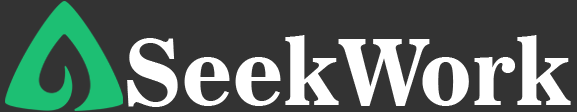
<style>
.page{position:relative;width:577px;height:112px;background:#333333}
.page>*{position:absolute;margin:0}
.t1{font:91px "News706BT-BoldC";color:#ffffff}
</style>
<div class="page">
<p class="t1" style="left:127px;top:35px;width:444px;height:72px">SeekWork</p>
</div>
